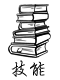
<style>
.page{position:relative;width:60px;height:80px;background:#ffffff}
.page>*{position:absolute;margin:0}
.t1{font:18px "STXingkaiSC-Light";letter-spacing:0.055em;color:#000000}
</style>
<div class="page">
<p class="t1" style="left:11px;top:60px;width:34px;height:17px">技能</p>
</div>
